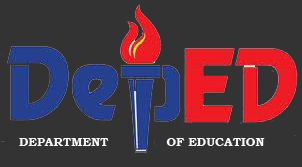
<style>
.page{position:relative;width:302px;height:167px;background:#333333}
.page>*{position:absolute;margin:0}
.t1{font:12px "BookmanOldStyle-Bold";color:#f6f6fa}
.t2{font:12px "BookmanOldStyle-Bold";color:#f9f9fc}
</style>
<div class="page">
<p class="t1" style="left:19px;top:138px;width:90px;height:8px">DEPARTMENT</p>
<p class="t2" style="left:166px;top:138px;width:99px;height:8px">OF EDUCATION</p>
</div>
